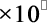
<style>
.page{position:relative;width:47px;height:23px;background:#ffffff}
.page>*{position:absolute;margin:0}
.t1{font:24px "TimesNewRomanPSMT";color:#000000;font-weight:bold;scale:1.09 1}
</style>
<div class="page">
<p class="t1" style="left:0px;top:5px;width:40px;height:18px">×10</p>
</div>
